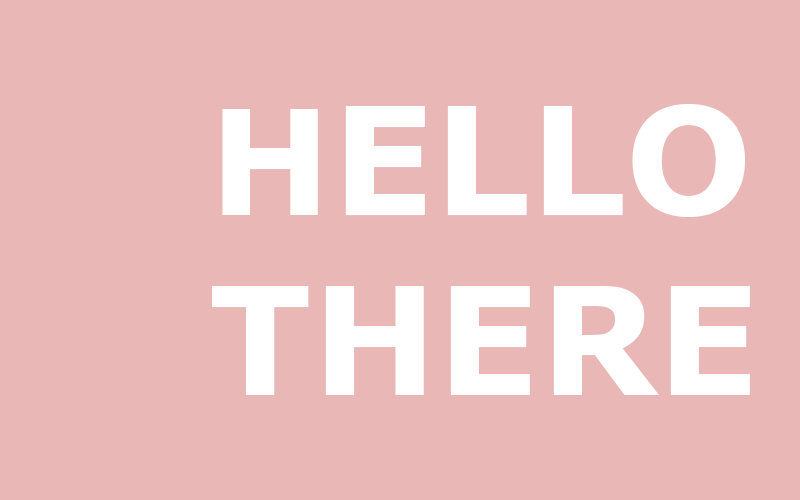
<style>
.page{position:relative;width:800px;height:500px;background:#eab7b7}
.page>*{position:absolute;margin:0}
.t1{font:150px "Verdana-Bold";color:#ffffff}
.t2{font:146px "Verdana-Bold";color:#ffffff}
</style>
<div class="page">
<p class="t1" style="left:212px;top:104px;width:538px;height:291px"><span class="t2">H</span>ELLO<br>THERE</p>
</div>
